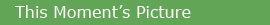
<style>
.page{position:relative;width:270px;height:25px;background:#62a557}
.page>*{position:absolute;margin:0}
.t1{font:16px "Verdana";color:#faf6f6}
</style>
<div class="page">
<p class="t1" style="left:14px;top:5px;width:177px;height:13px">This Moment’s Picture</p>
</div>
